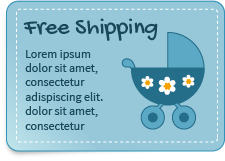
<style>
.page{position:relative;width:225px;height:161px;background:#97c8da}
.page>*{position:absolute;margin:0}
.t1{font:24px "GochiHand-Regular";color:#184758}
.t2{font:12px "SourceSansPro-Regular";color:#184758}
</style>
<div class="page">
<p class="t1" style="left:23px;top:18px;width:135px;height:23px">Free Shipping</p>
<p class="t2" style="left:25px;top:50px;width:78px;height:80px">Lorem ipsum dolor sit amet, consectetur adispiscing elit. dolor sit amet, consectetur</p>
</div>
